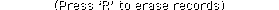
<style>
.page{position:relative;width:279px;height:10px;background:#ffffff}
.page>*{position:absolute;margin:0}
.t1{font:12px "Geneva";color:#000000}
</style>
<div class="page">
<p class="t1" style="left:55px;top:0px;width:169px;height:12px">(Press ‘R’ to erase records)</p>
</div>
